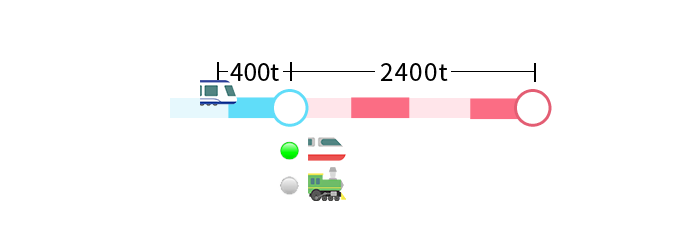
<style>
.page{position:relative;width:700px;height:250px;background:#ffffff}
.page>*{position:absolute;margin:0}
.t1{font:24.1px "SourceHanSansCN-Regular";color:#000000}
.t2{font:24.1px "SourceHanSansCN-Regular";letter-spacing:0.05em;color:#000000}
.t3{font:35.2px "SourceHanSansCN-Regular";letter-spacing:0.05em;color:#ffffff}
</style>
<div class="page">
<p class="t1" style="left:230px;top:63px;width:49px;height:18px">400t</p>
<p class="t2" style="left:380px;top:63px;width:68px;height:18px">2400t</p>
<p class="t3" style="left:274px;top:92px;width:32px;height:32px">●</p>
<p class="t3" style="left:517px;top:92px;width:32px;height:32px">●</p>
</div>
